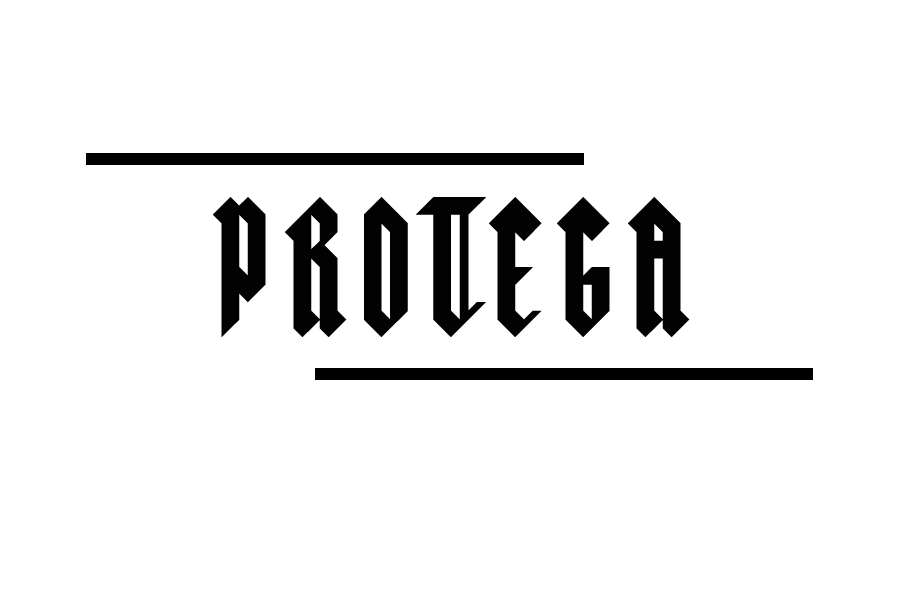
<style>
.page{position:relative;width:900px;height:600px;background:#ffffff}
.page>*{position:absolute;margin:0}
.t1{font:175px "Saxon-Abbey";letter-spacing:0.05em;color:#020202}
</style>
<div class="page">
<p class="t1" style="left:213px;top:197px;width:477px;height:140px">PROTEGA</p>
</div>
